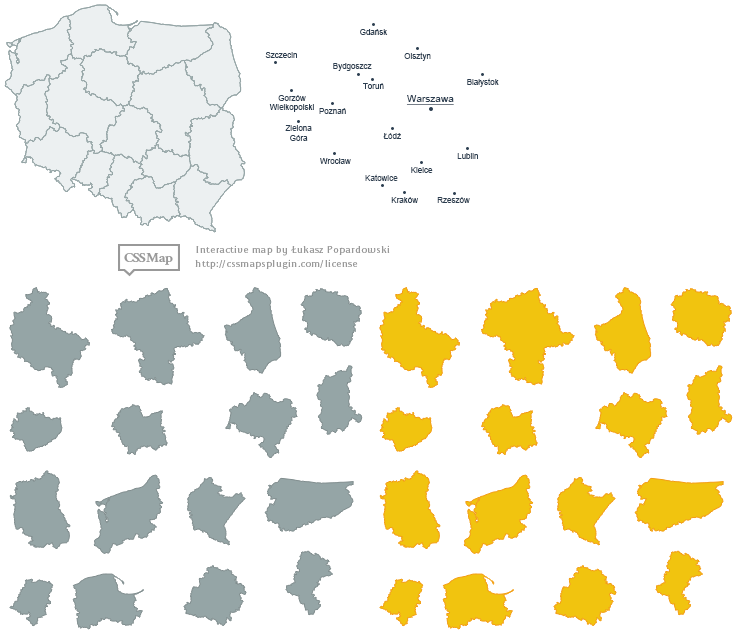
<style>
.page{position:relative;width:742px;height:639px;background:#ffffff}
.page>*{position:absolute;margin:0}
.t1{font:8px "ArialMT";color:#2c3e50}
.t2{font:10px "ArialMT";color:#2c3e50;text-decoration:underline}
</style>
<div class="page">
<p class="t1" style="left:360px;top:29px;width:28px;height:6px">Gdańsk</p>
<p class="t1" style="left:265px;top:52px;width:32px;height:6px">Szczecin</p>
<p class="t1" style="left:404px;top:52px;width:27px;height:9px">Olsztyn</p>
<p class="t1" style="left:333px;top:63px;width:39px;height:8px">Bydgoszcz</p>
<p class="t1" style="left:467px;top:78px;width:32px;height:9px">Białystok</p>
<p class="t1" style="left:363px;top:83px;width:21px;height:6px">Toruń</p>
<p class="t1" style="left:269px;top:95px;width:45px;height:17px;text-align:center">Gorzów<br>Wielkopolski</p>
<p class="t2" style="left:406px;top:95px;width:48px;height:10px">Warszawa</p>
<p class="t1" style="left:319px;top:108px;width:27px;height:6px">Poznań</p>
<p class="t1" style="left:285px;top:125px;width:27px;height:16px;text-align:center">Zielona<br>Góra</p>
<p class="t1" style="left:383px;top:133px;width:18px;height:6px">Łódź</p>
<p class="t1" style="left:320px;top:158px;width:31px;height:6px">Wrocław</p>
<p class="t1" style="left:457px;top:153px;width:21px;height:6px">Lublin</p>
<p class="t1" style="left:365px;top:174px;width:33px;height:7px">Katowice</p>
<p class="t1" style="left:411px;top:167px;width:22px;height:6px">Kielce</p>
<p class="t1" style="left:391px;top:197px;width:27px;height:6px">Kraków</p>
<p class="t1" style="left:437px;top:197px;width:33px;height:6px">Rzeszów</p>
</div>
